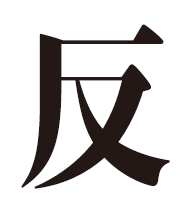
<style>
.page{position:relative;width:193px;height:211px;background:#ffffff}
.page>*{position:absolute;margin:0}
.t1{font:178.5px "KochoStd-Heavy";letter-spacing:0.015em;color:#231815;font-weight:bold;scale:0.88 1}
</style>
<div class="page">
<p class="t1" style="left:21px;top:24px;width:149px;height:165px">反</p>
</div>
